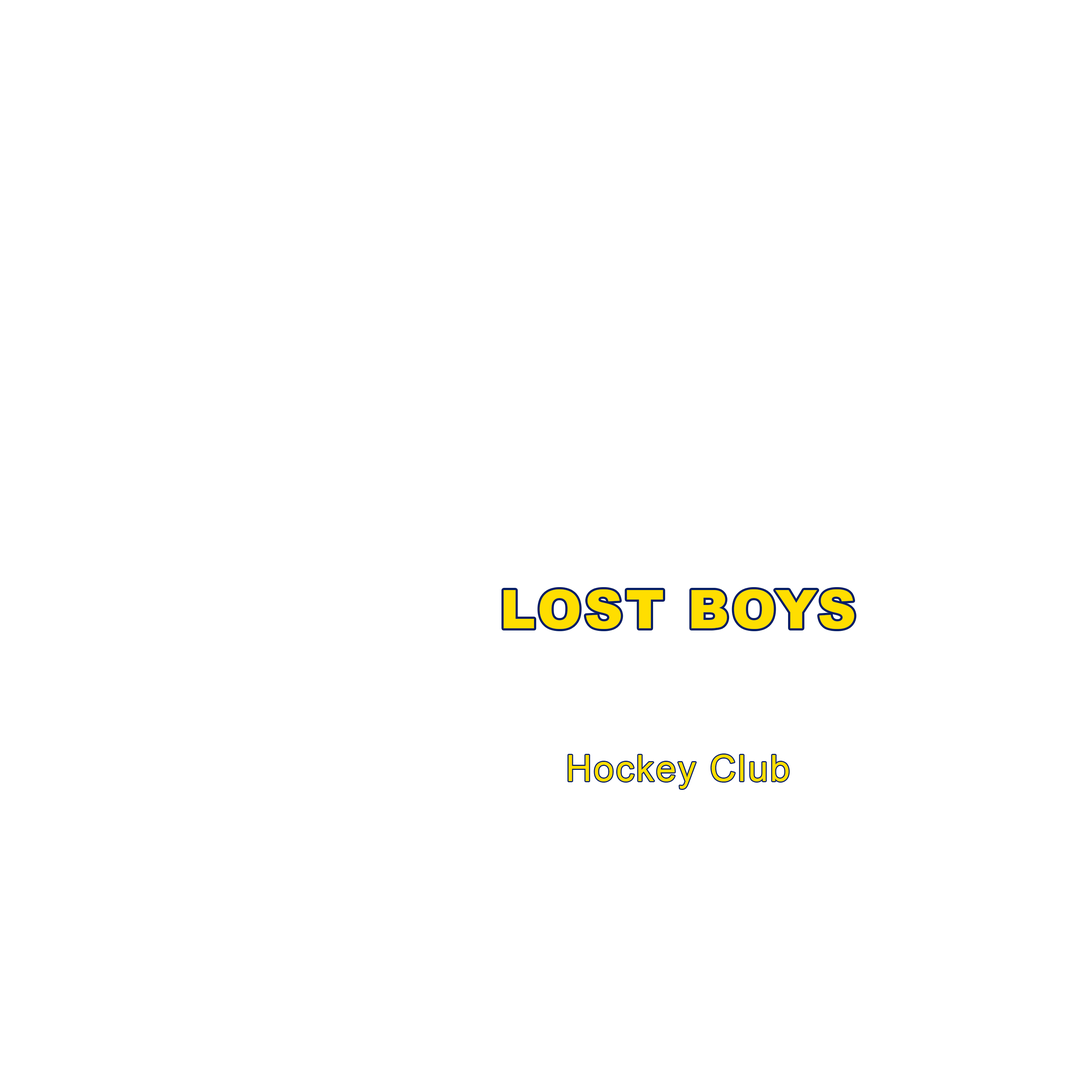
<style>
.page{position:relative;width:1092px;height:1092px;background:#ffffff}
.page>*{position:absolute;margin:0}
.t1{font:53.5px "Arial-Black";letter-spacing:0.05em;color:#ffde00}
.t2{font:36.4px "ArialMT";letter-spacing:0.05em;color:#ffde00}
</style>
<div class="page">
<p class="t1" style="left:503px;top:589px;width:351px;height:40px">LOST BOYS</p>
<p class="t2" style="left:569px;top:755px;width:220px;height:34px">Hockey Club</p>
</div>
